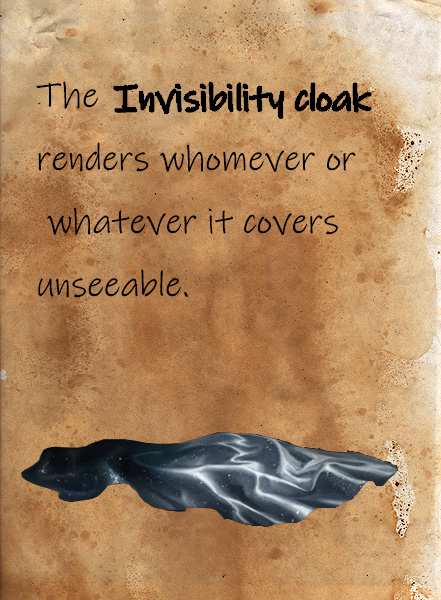
<style>
.page{position:relative;width:441px;height:600px}
.page>*{position:absolute;margin:0}
.t1{font:36px "InkFree";color:#000000}
</style>
<div class="page">
<p class="t1" style="left:36px;top:81px;width:320px;height:217px">The                             <br>renders whomever or<br> whatever it covers <br>unseeable.</p>
</div>
